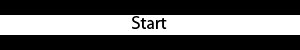
<style>
.page{position:relative;width:300px;height:50px;background:#000000}
.page>*{position:absolute;margin:0}
.t1{font:18px "MyriadPro-Regular";color:#000000}
</style>
<div class="page">
<p class="t1" style="left:132px;top:16px;width:35px;height:13px">Start</p>
</div>
